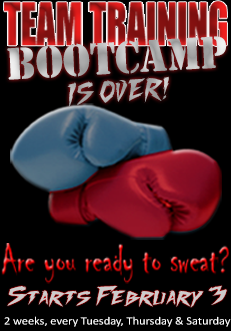
<style>
.page{position:relative;width:231px;height:331px;background:#000000}
.page>*{position:absolute;margin:0}
.t1{font:41.9px/110.7px "StencilStd";scale:0.91 1}
.t2{font:24.6px/28.7px "FightingSpiritturbo";scale:0.87 1}
.t3{font:21.3px "FightingSpiritturbo";color:#cccccc;scale:1.1 1}
.t4{font:11.3px "Calibri";color:#ffffff;scale:1.1 1}
</style>
<div class="page">
<p class="t1" style="left:7px;top:36px;width:219px;height:72px;text-align:center;rotate:-3deg">BOOTCAMP<br><span class="t2">IS OVER!</span></p>
<p class="t3" style="left:7px;top:285px;width:220px;height:23px">Starts February 3</p>
<p class="t4" style="left:4px;top:316px;width:227px;height:11px">2 weeks, every Tuesday, Thursday &amp; Saturday</p>
</div>
